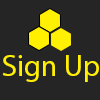
<style>
.page{position:relative;width:100px;height:100px;background:#262525}
.page>*{position:absolute;margin:0}
.t1{font:30px "MyriadPro-Regular";color:#fff004}
</style>
<div class="page">
<p class="t1" style="left:2px;top:55px;width:97px;height:27px">Sign Up</p>
</div>
